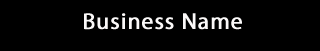
<style>
.page{position:relative;width:320px;height:51px;background:#000000}
.page>*{position:absolute;margin:0}
.t1{font:23px "MyriadPro-Regular";letter-spacing:0.03em;color:#fbf9f9;font-weight:bold}
</style>
<div class="page">
<p class="t1" style="left:84px;top:13px;width:158px;height:17px">Business Name</p>
</div>
